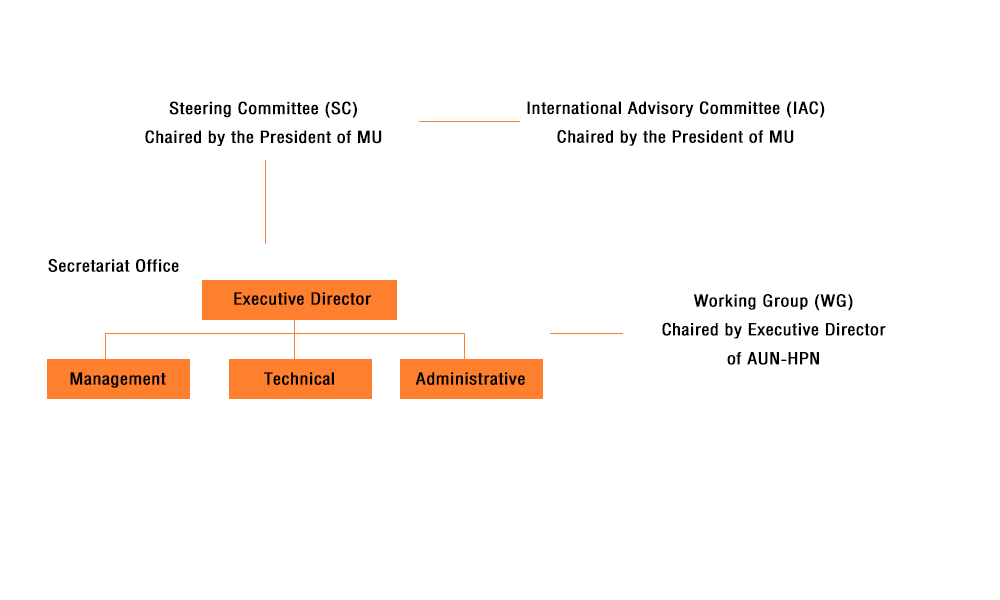
<style>
.page{position:relative;width:1000px;height:600px;background:#ffffff}
.page>*{position:absolute;margin:0}
.t1{font:24px "DBHelvethaicaX-57Cond";letter-spacing:0.01em;color:#000000;font-weight:bold}
</style>
<div class="page">
<p class="t1" style="left:145px;top:101px;width:237px;height:45px;text-align:center">Steering Committee (SC) <br>Chaired by the President of MU</p>
<p class="t1" style="left:527px;top:101px;width:298px;height:45px;text-align:center">International Advisory Committee (IAC)<br>Chaired by the President of MU</p>
<p class="t1" style="left:48px;top:259px;width:131px;height:13px">Secretariat Office</p>
<p class="t1" style="left:234px;top:292px;width:137px;height:13px">Executive Director</p>
<p class="t1" style="left:662px;top:294px;width:224px;height:71px;text-align:center">Working Group (WG)<br>Chaired by Executive Director <br>of AUN-HPN</p>
<p class="t1" style="left:70px;top:372px;width:96px;height:16px">Management</p>
<p class="t1" style="left:264px;top:372px;width:70px;height:13px">Technical</p>
<p class="t1" style="left:415px;top:372px;width:110px;height:13px">Administrative</p>
</div>
